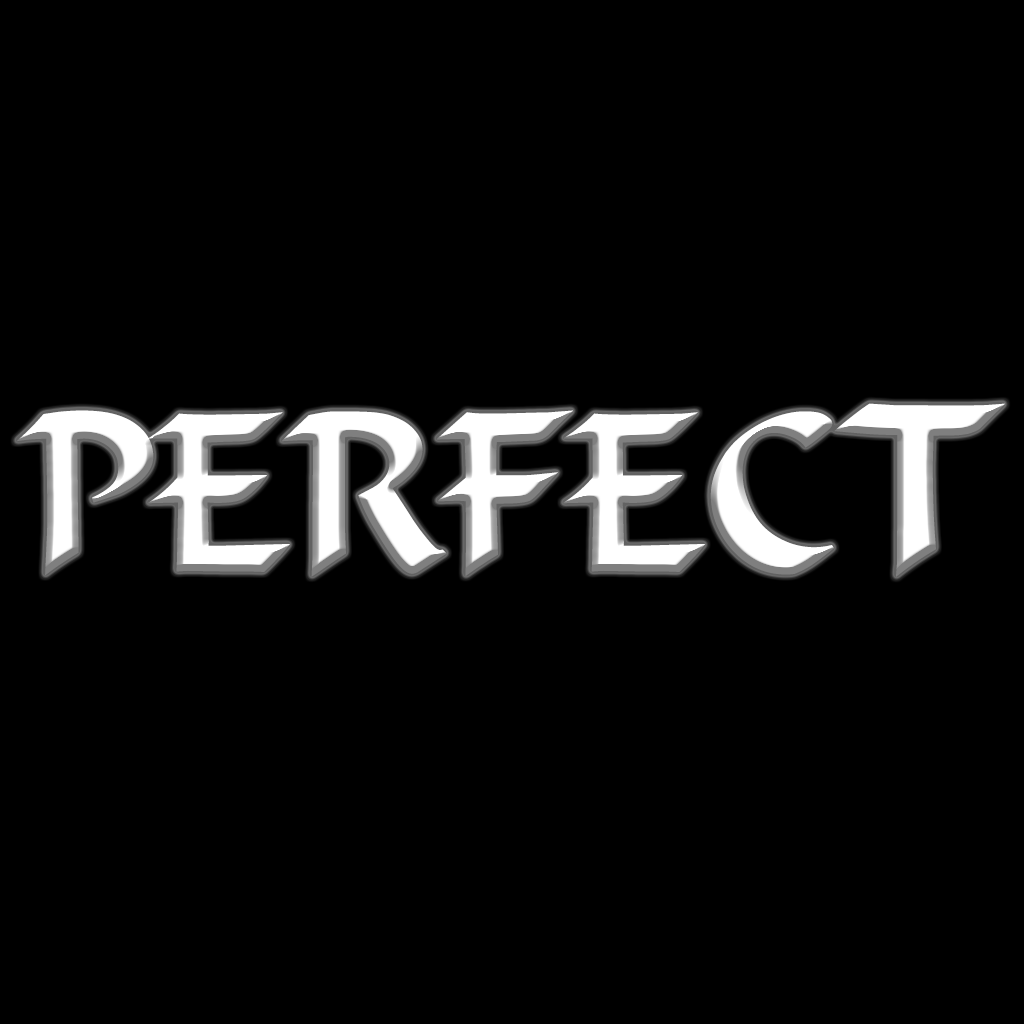
<style>
.page{position:relative;width:1024px;height:1024px;background:#000000}
.page>*{position:absolute;margin:0}
.t1{font:219px "Calligraphic";color:#ffffff}
.t2{font:229px "Calligraphic";color:#ffffff}
</style>
<div class="page">
<p class="t1" style="left:16px;top:403px;width:989px;height:174px">PERFEC<span class="t2">T</span></p>
</div>
